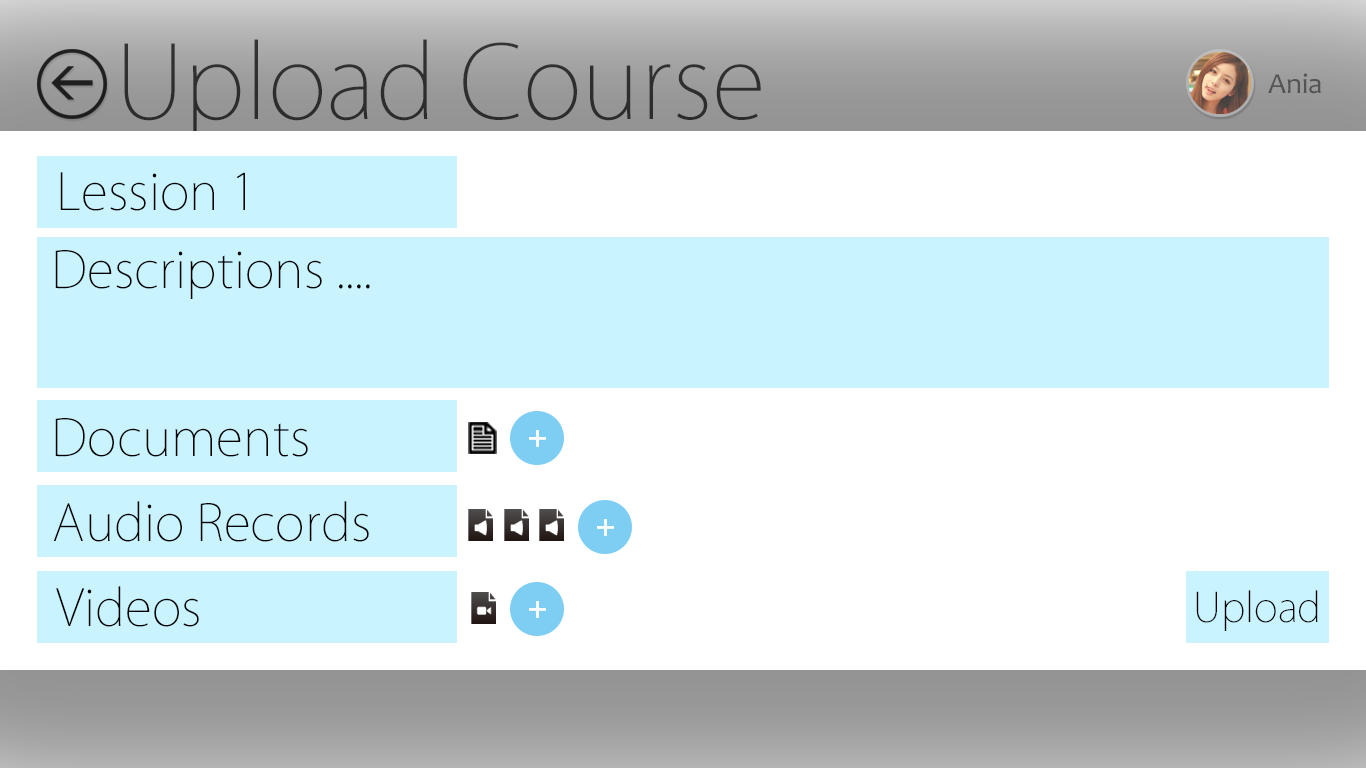
<style>
.page{position:relative;width:1366px;height:768px;background:#ffffff}
.page>*{position:absolute;margin:0}
.t1{font:100px "KozGoPr6N-ExtraLight";color:#2e2e2e}
.t2{font:29.2px "Candara";color:#545454}
.t3{font:50px "KozGoPr6N-ExtraLight";color:#000000}
.t4{font:40px "KozGoPr6N-ExtraLight";color:#000000}
</style>
<div class="page">
<p class="t1" style="left:124px;top:39px;width:637px;height:103px">Upload Course</p>
<p class="t2" style="left:1268px;top:73px;width:53px;height:21px">Ania</p>
<p class="t3" style="left:60px;top:172px;width:185px;height:39px">Lession 1</p>
<p class="t3" style="left:55px;top:250px;width:315px;height:49px">Descriptions ....</p>
<p class="t3" style="left:55px;top:418px;width:253px;height:39px">Documents</p>
<p class="t3" style="left:53px;top:501px;width:316px;height:41px">Audio Records</p>
<p class="t3" style="left:56px;top:586px;width:143px;height:41px">Videos</p>
<p class="t4" style="left:1196px;top:590px;width:122px;height:41px">Upload</p>
</div>
